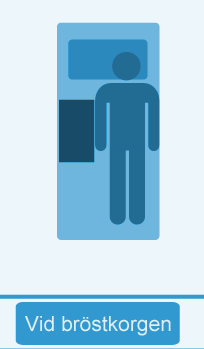
<style>
.page{position:relative;width:204px;height:349px;background:#ecf6fb}
.page>*{position:absolute;margin:0}
.t1{font:21px "ArialMT";color:#dfeff8}
</style>
<div class="page">
<p class="t1" style="left:25px;top:316px;width:146px;height:20px">Vid bröstkorgen</p>
</div>
